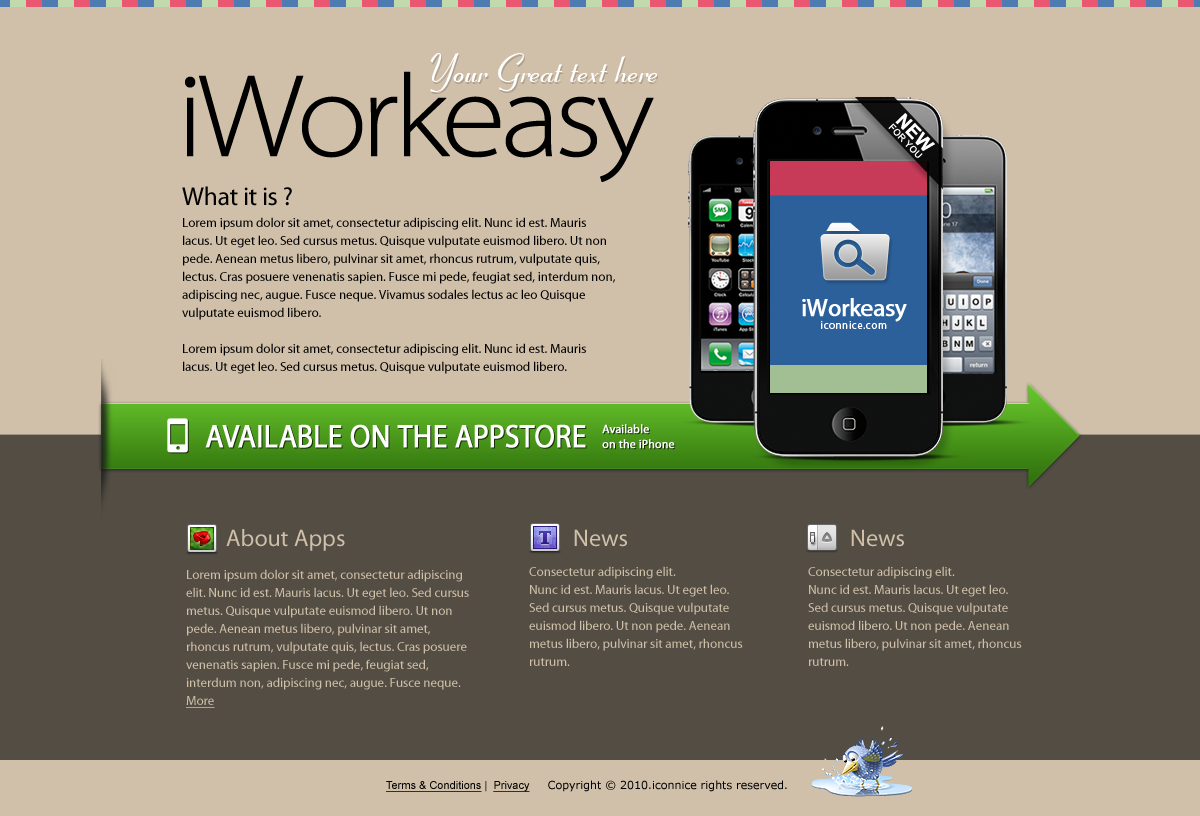
<style>
.page{position:relative;width:1200px;height:816px;background:#d0c0a9}
.page>*{position:absolute;margin:0}
.t1{font:40.8px "968-CAI978";color:#ffffff}
.t2{font:118.9px "MyriadPro-LightSemiExt";letter-spacing:-0.075em;color:#000000;font-weight:bold}
.t3{font:9.3px/9.3px "ArialMT";letter-spacing:0.025em;color:#ffffff;text-transform:uppercase}
.t4{font:18.6px/9.3px "Arial-BoldMT";letter-spacing:0.025em;color:#ffffff}
.t5{font:26px "MyriadPro-Regular";letter-spacing:-0.01em;color:#000000}
.t6{font:13px/18px "MyriadPro-Regular";color:#000000}
.t7{font:24.6px "MyriadPro-Regular";letter-spacing:-0.025em;color:#ffffff;font-weight:bold}
.t8{font:10.8px "MyriadPro-Regular";letter-spacing:0.05em;color:#ffffff}
.t9{font:32.8px "MyriadPro-Regular";letter-spacing:-0.005em;color:#ffffff;text-transform:uppercase;font-weight:bold;scale:0.9 1}
.t10{font:12px/15px "MyriadPro-Regular";letter-spacing:-0.005em;color:#ffffff;font-weight:bold}
.t11{font:24px "MyriadPro-Regular";color:#d0c0a9}
.t12{font:13px/18px "MyriadPro-Regular";color:#d0c0a9}
.t13{font:13px/18px "MyriadPro-Regular";color:#d0c0a9;text-decoration:underline}
.t14{font:11px "Verdana";color:#000000}
.t15{font:11px "ArialMT";color:#000000;text-decoration:underline}
.t16{font:11px "ArialMT";color:#000000}
</style>
<div class="page">
<p class="t1" style="left:430px;top:53px;width:228px;height:39px">Your Great text here</p>
<p class="t2" style="left:185px;top:71px;width:469px;height:111px">iWorkeasy</p>
<p class="t3" style="left:888px;top:113px;width:47px;height:45px;rotate:46deg"><span class="t4">NEW <br></span>for you</p>
<p class="t5" style="left:182px;top:186px;width:110px;height:20px">What it is ?</p>
<p class="t6" style="left:182px;top:217px;width:433px;height:157px">Lorem ipsum dolor sit amet, consectetur adipiscing elit. Nunc id est. Mauris lacus. Ut eget leo. Sed cursus metus. Quisque vulputate euismod libero. Ut non pede. Aenean metus libero, pulvinar sit amet, rhoncus rutrum, vulputate quis, lectus. Cras posuere venenatis sapien. Fusce mi pede, feugiat sed, interdum non, adipiscing nec, augue. Fusce neque. Vivamus sodales lectus ac leo Quisque vulputate euismod libero.<br><br>Lorem ipsum dolor sit amet, consectetur adipiscing elit. Nunc id est. Mauris lacus. Ut eget leo. Sed cursus metus. Quisque vulputate euismod libero.</p>
<p class="t7" style="left:802px;top:298px;width:105px;height:24px">iWorkeasy</p>
<p class="t8" style="left:821px;top:321px;width:66px;height:8px">iconnice.com</p>
<p class="t9" style="left:205px;top:424px;width:381px;height:24px">Available on the AppStore</p>
<p class="t10" style="left:602px;top:424px;width:73px;height:25px">Available <br>on the iPhone</p>
<p class="t11" style="left:226px;top:529px;width:119px;height:22px">About Apps</p>
<p class="t11" style="left:574px;top:529px;width:53px;height:18px">News</p>
<p class="t11" style="left:851px;top:529px;width:53px;height:18px">News</p>
<p class="t12" style="left:186px;top:569px;width:283px;height:139px">Lorem ipsum dolor sit amet, consectetur adipiscing elit. Nunc id est. Mauris lacus. Ut eget leo. Sed cursus metus. Quisque vulputate euismod libero. Ut non pede. Aenean metus libero, pulvinar sit amet, rhoncus rutrum, vulputate quis, lectus. Cras posuere venenatis sapien. Fusce mi pede, feugiat sed, interdum non, adipiscing nec, augue. Fusce neque. <span class="t13">More</span></p>
<p class="t12" style="left:529px;top:566px;width:214px;height:100px">Consectetur adipiscing elit. <br>Nunc id est. Mauris lacus. Ut eget leo. Sed cursus metus. Quisque vulputate euismod libero. Ut non pede. Aenean metus libero, pulvinar sit amet, rhoncus rutrum.</p>
<p class="t12" style="left:808px;top:566px;width:214px;height:100px">Consectetur adipiscing elit. <br>Nunc id est. Mauris lacus. Ut eget leo. Sed cursus metus. Quisque vulputate euismod libero. Ut non pede. Aenean metus libero, pulvinar sit amet, rhoncus rutrum.</p>
<p class="t14" style="left:386px;top:780px;width:401px;height:12px"><span class="t15">Terms &amp; Conditions</span><span class="t16"> |  </span><span class="t15">Privacy      </span>Copyright © 2010.iconnice rights reserved.</p>
</div>
